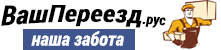
<style>
.page{position:relative;width:221px;height:50px;background:#ffffff}
.page>*{position:absolute;margin:0}
.t1{font:28.2px "RobotoCondensed-BoldItalic";color:#000000}
.t2{font:14.7px "RobotoCondensed-BoldItalic";color:#000000}
.t3{font:18.7px "RobotoCondensed-BoldItalic";color:#ffffff}
</style>
<div class="page">
<p class="t1" style="left:1px;top:5px;width:165px;height:23px">ВашПереезд<span class="t2">.рус</span></p>
<p class="t3" style="left:31px;top:31px;width:93px;height:15px">наша забота</p>
</div>
